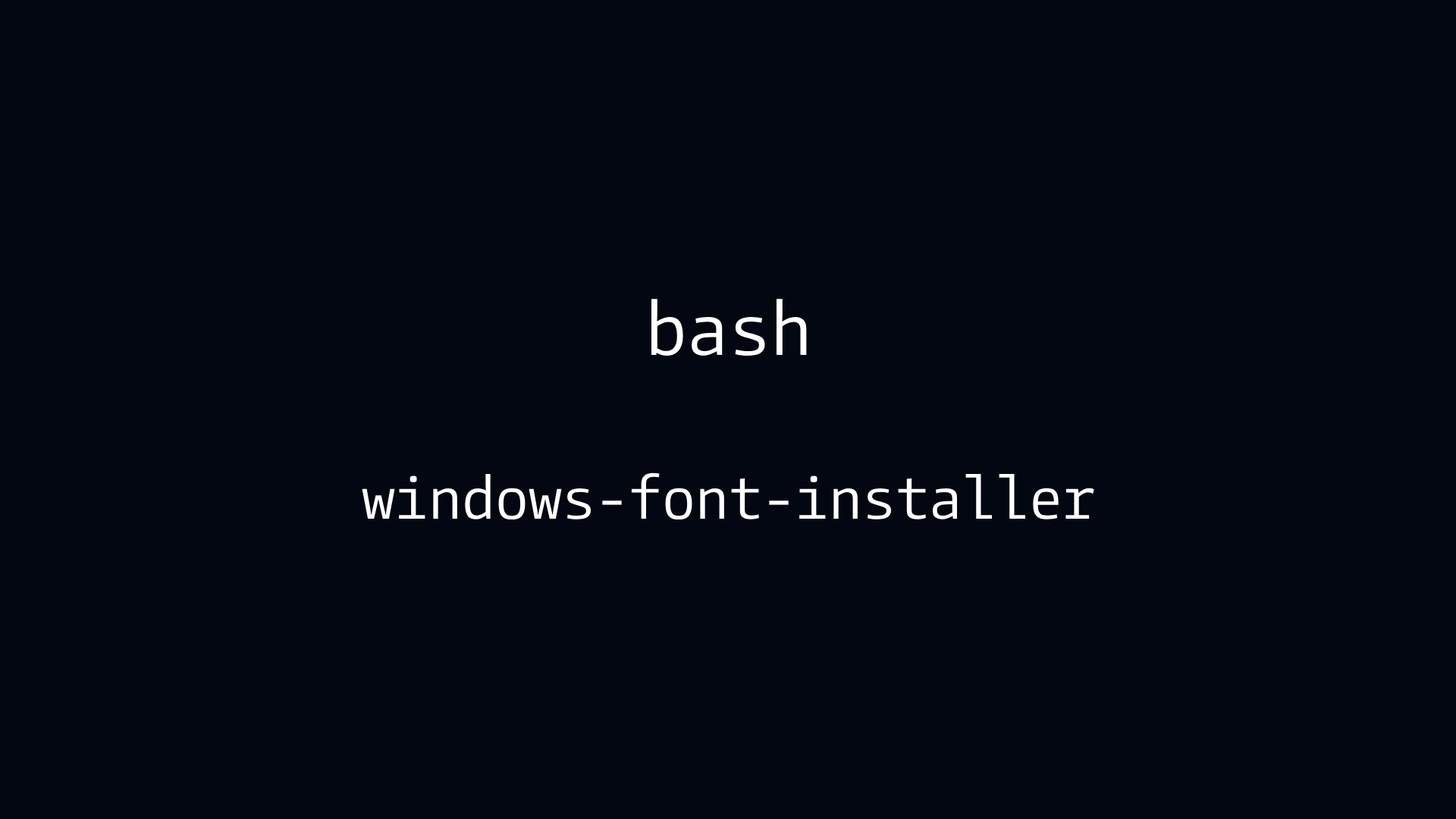
<style>
.page{position:relative;width:1456px;height:819px;background:#030712}
.page>*{position:absolute;margin:0}
.t1{font:60.7px "CamingoCode-Regular";color:#ffffff}
.t2{font:75.8px "CamingoCode-Regular";color:#ffffff}
</style>
<div class="page">
<p class="t1" style="left:362px;top:299px;width:732px;height:221px;text-align:center"><span class="t2">bash<br><br></span>windows-font-installer</p>
</div>
